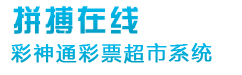
<style>
.page{position:relative;width:242px;height:75px;background:#ffffff}
.page>*{position:absolute;margin:0}
.t1{font:30px "HYk1gs-GBpc-EUC-H";letter-spacing:0.075em;color:#00afdd}
.t2{font:20px "MicrosoftYaHei";letter-spacing:0.1em;color:#00afdd;font-weight:bold}
</style>
<div class="page">
<p class="t1" style="left:13px;top:6px;width:125px;height:28px">拼搏在线</p>
<p class="t2" style="left:11px;top:43px;width:201px;height:21px">彩神通彩票超市系统</p>
</div>
